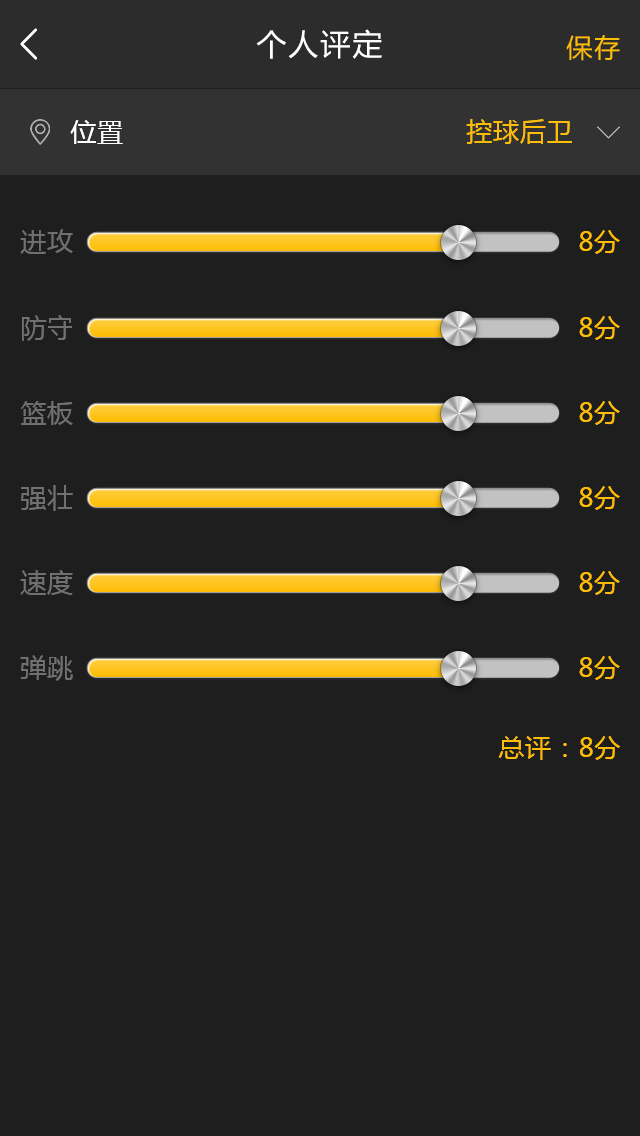
<style>
.page{position:relative;width:640px;height:1136px;background:#1e1e1e}
.page>*{position:absolute;margin:0}
.t1{font:30px "MicrosoftYaHei";letter-spacing:0.07em;color:#ffffff}
.t2{font:26px "MicrosoftYaHei";letter-spacing:0.07em;color:#fdbd06}
.t3{font:26px "MicrosoftYaHei";letter-spacing:0.03em;color:#ffffff}
.t4{font:26px "MicrosoftYaHei";letter-spacing:0.03em;color:#fdbd06}
.t5{font:26px "MicrosoftYaHei";letter-spacing:0.03em;color:#707070}
</style>
<div class="page">
<p class="t1" style="left:256px;top:29px;width:126px;height:30px">个人评定</p>
<p class="t2" style="left:566px;top:35px;width:54px;height:26px">保存</p>
<p class="t3" style="left:70px;top:120px;width:53px;height:24px">位置</p>
<p class="t4" style="left:466px;top:119px;width:106px;height:25px">控球后卫</p>
<p class="t5" style="left:20px;top:229px;width:53px;height:25px">进攻</p>
<p class="t4" style="left:579px;top:230px;width:41px;height:24px">8分</p>
<p class="t5" style="left:22px;top:315px;width:50px;height:26px">防守</p>
<p class="t4" style="left:579px;top:316px;width:41px;height:24px">8分</p>
<p class="t5" style="left:20px;top:401px;width:53px;height:24px">篮板</p>
<p class="t4" style="left:579px;top:401px;width:41px;height:24px">8分</p>
<p class="t5" style="left:21px;top:485px;width:52px;height:26px">强壮</p>
<p class="t4" style="left:579px;top:486px;width:41px;height:24px">8分</p>
<p class="t5" style="left:20px;top:570px;width:53px;height:25px">速度</p>
<p class="t4" style="left:579px;top:571px;width:41px;height:24px">8分</p>
<p class="t5" style="left:20px;top:655px;width:53px;height:26px">弹跳</p>
<p class="t4" style="left:579px;top:656px;width:41px;height:24px">8分</p>
<p class="t4" style="left:498px;top:736px;width:123px;height:24px">总评：8分</p>
</div>
